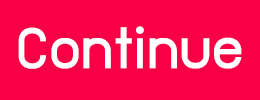
<style>
.page{position:relative;width:260px;height:100px;background:#f80046}
.page>*{position:absolute;margin:0}
.t1{font:65px "supermarket";color:#ffffff;font-weight:bold}
</style>
<div class="page">
<p class="t1" style="left:18px;top:26px;width:224px;height:43px">Continue</p>
</div>
